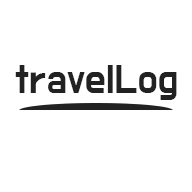
<style>
.page{position:relative;width:192px;height:192px;background:#ffffff}
.page>*{position:absolute;margin:0}
.t1{font:41.2px "DoHyeon-Regular";color:#222222}
</style>
<div class="page">
<p class="t1" style="left:15px;top:65px;width:162px;height:35px">travelLog</p>
</div>
